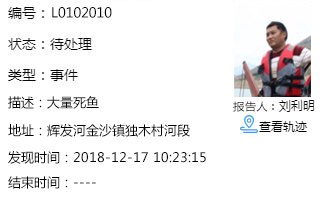
<style>
.page{position:relative;width:324px;height:198px;background:#ffffff}
.page>*{position:absolute;margin:0}
.t1{font:13.5px "MicrosoftYaHei";color:#000000}
.t2{font:13px "MicrosoftYaHei";color:#000000}
.t3{font:10.8px "MicrosoftYaHei";color:#000000;scale:1.08 1}
.t4{font:13px/24.9px "MicrosoftYaHei";color:#000000}
</style>
<div class="page">
<p class="t1" style="left:52px;top:7px;width:60px;height:11px">L0102010</p>
<p class="t2" style="left:8px;top:96px;width:91px;height:13px">描述：大量死鱼</p>
<p class="t3" style="left:233px;top:101px;width:35px;height:11px">报告人</p>
<p class="t2" style="left:8px;top:124px;width:182px;height:13px">地址：辉发河金沙镇独木村河段</p>
<p class="t4" style="left:8px;top:151px;width:198px;height:38px">发现时间：2018-12-17 10:23:15<br>结束时间：----</p>
</div>
